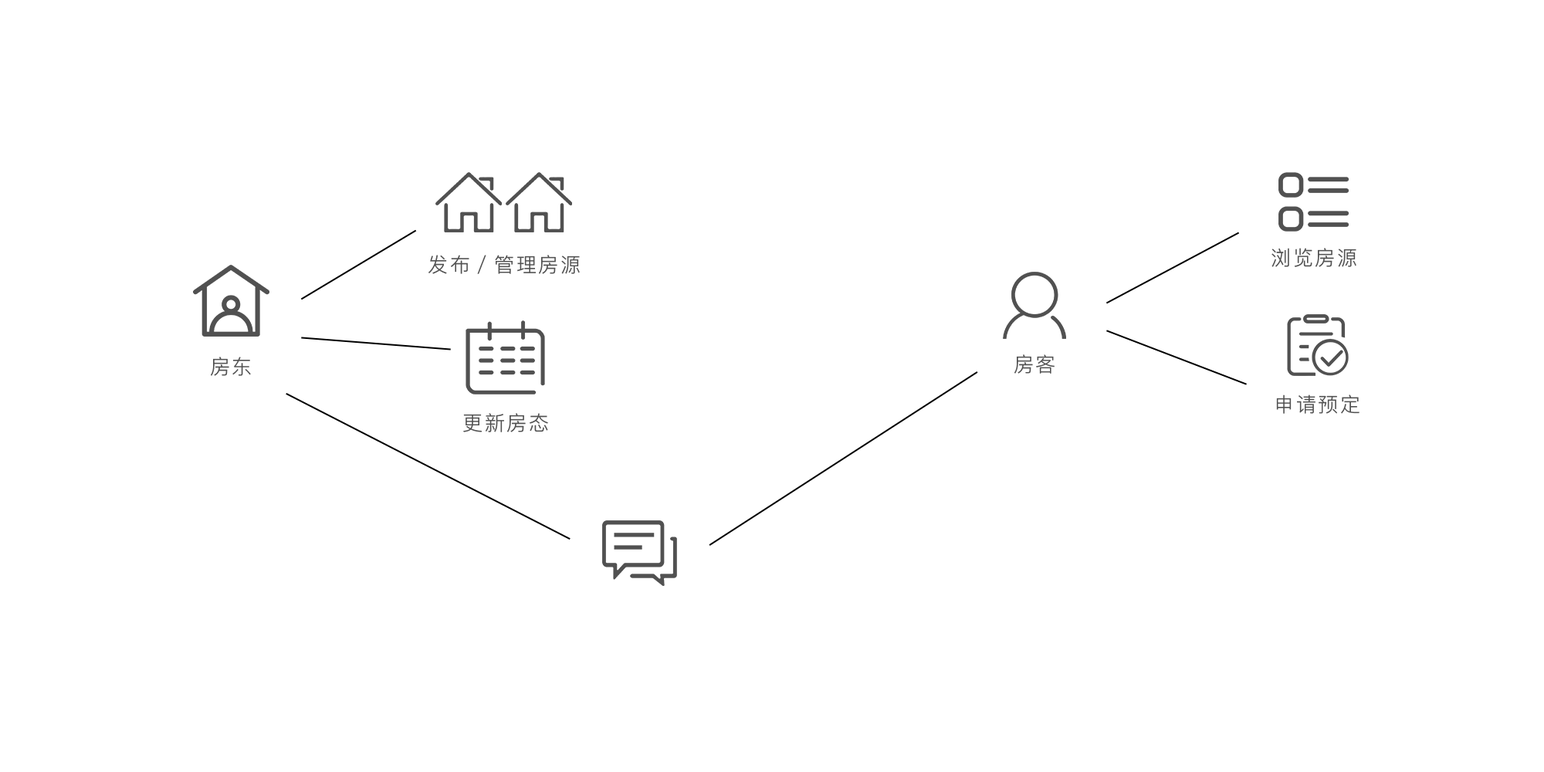
<style>
.page{position:relative;width:1544px;height:772px;background:#ffffff}
.page>*{position:absolute;margin:0}
.t1{font:20.1px "PingFangSC-Light";letter-spacing:0.1em;color:#515151}
</style>
<div class="page">
<p class="t1" style="left:429px;top:255px;width:151px;height:19px">发布／管理房源</p>
<p class="t1" style="left:1272px;top:248px;width:85px;height:19px">浏览房源</p>
<p class="t1" style="left:211px;top:357px;width:40px;height:19px">房东</p>
<p class="t1" style="left:1015px;top:354px;width:40px;height:20px">房客</p>
<p class="t1" style="left:1276px;top:395px;width:84px;height:19px">申请预定</p>
<p class="t1" style="left:463px;top:413px;width:85px;height:19px">更新房态</p>
</div>
